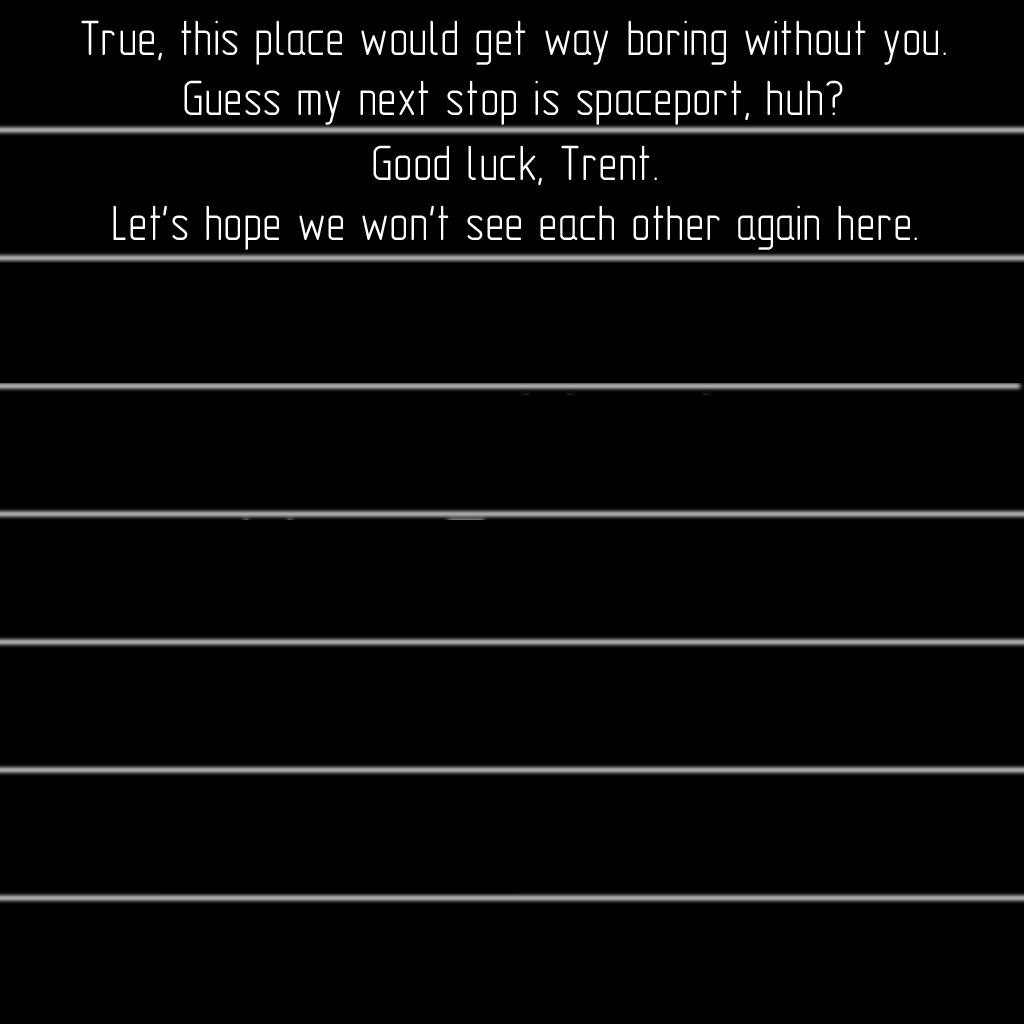
<style>
.page{position:relative;width:1024px;height:1024px;background:#000000}
.page>*{position:absolute;margin:0}
.t1{font:50px "GOST-2.304-81typeA";color:#ffffff}
</style>
<div class="page">
<p class="t1" style="left:81px;top:20px;width:865px;height:105px;text-align:center">True, this place would get way boring without you.<br>Guess my next stop is spaceport, huh?</p>
<p class="t1" style="left:113px;top:145px;width:804px;height:105px;text-align:center">Good luck, Trent.<br>Let's hope we won't see each other again here.</p>
</div>
